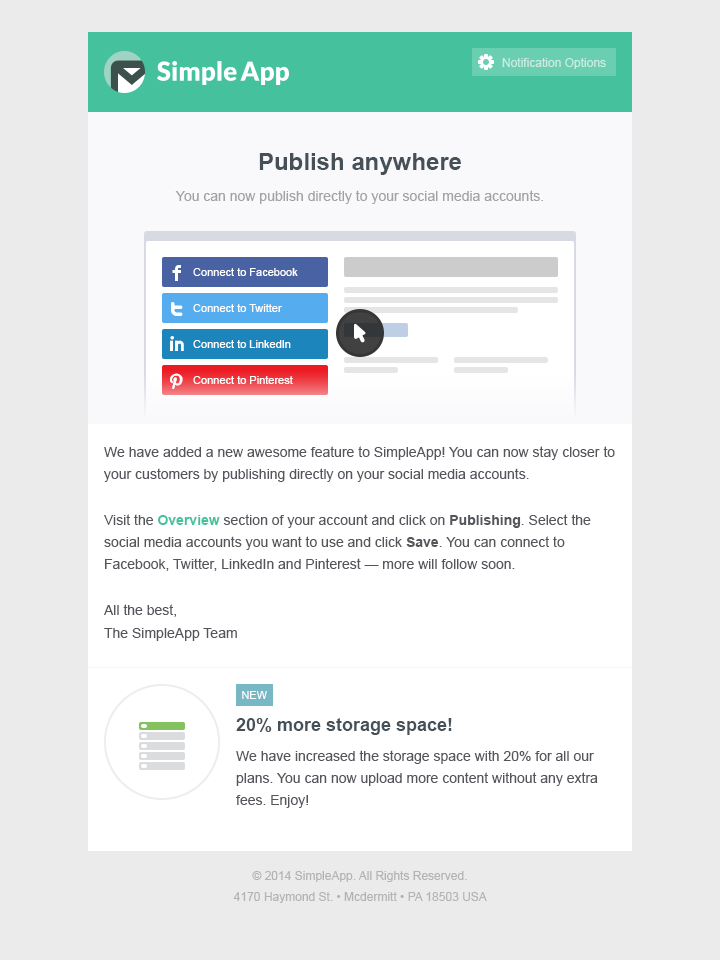
<style>
.page{position:relative;width:720px;height:960px;background:#ebebeb}
.page>*{position:absolute;margin:0}
.t1{font:12px "ArialMT";color:#ccece2}
.t2{font:24px "Arial-BoldMT";color:#465059}
.t3{font:14px "ArialMT";color:#a1a2a5}
.t4{font:26px "Socialico";color:#ffffff}
.t5{font:11px "ArialMT";color:#ffffff}
.t6{font:26px "SocialicoPlus";color:#ffffff}
.t7{font:14px/22px "ArialMT";color:#54565c}
.t8{font:14px/22px "Arial-BoldMT";color:#45c29d}
.t9{font:14px/22px "Arial-BoldMT";color:#54565c}
.t10{font:11px "ArialMT";color:#ffffff;text-transform:uppercase}
.t11{font:18px "Arial-BoldMT";color:#465059}
.t12{font:12px/21px "ArialMT";color:#b3b3b3}
</style>
<div class="page">
<p class="t1" style="left:502px;top:58px;width:104px;height:11px">Notification Options</p>
<p class="t2" style="left:259px;top:153px;width:202px;height:22px">Publish anywhere</p>
<p class="t3" style="left:175px;top:190px;width:368px;height:14px">You can now publish directly to your social media accounts.</p>
<p class="t4" style="left:172px;top:265px;width:9px;height:16px">F</p>
<p class="t5" style="left:193px;top:268px;width:105px;height:8px">Connect to Facebook</p>
<p class="t4" style="left:171px;top:302px;width:12px;height:14px">T</p>
<p class="t5" style="left:193px;top:304px;width:89px;height:8px">Connect to Twitter</p>
<p class="t4" style="left:170px;top:336px;width:14px;height:15px">I</p>
<p class="t5" style="left:193px;top:340px;width:98px;height:8px">Connect to LinkedIn</p>
<p class="t6" style="left:170px;top:373px;width:13px;height:16px">P</p>
<p class="t5" style="left:193px;top:376px;width:100px;height:8px">Connect to Pinterest</p>
<p class="t7" style="left:103px;top:446px;width:512px;height:195px">We have added a new awesome feature to SimpleApp! You can now stay closer to your customers by publishing directly on your social media accounts. <br><br>Visit the <span class="t8">Overview </span>section of your account and click on <span class="t9">Publishing</span>. Select the social media accounts you want to use and click <span class="t9">Save</span>. You can connect to Facebook, Twitter, LinkedIn and Pinterest — more will follow soon.<br><br>All the best,<br>The SimpleApp Team</p>
<p class="t10" style="left:242px;top:691px;width:25px;height:8px">new</p>
<p class="t11" style="left:236px;top:718px;width:216px;height:17px">20% more storage space!</p>
<p class="t7" style="left:236px;top:750px;width:362px;height:58px">We have increased the storage space with 20% for all our plans. You can now upload more content without any extra fees. Enjoy!</p>
<p class="t12" style="left:233px;top:871px;width:254px;height:32px;text-align:center">© 2014 SimpleApp. All Rights Reserved.<br>4170 Haymond St. • Mcdermitt • PA 18503 USA</p>
</div>
